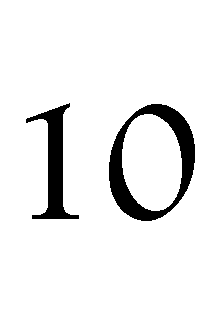
<style>
.page{position:relative;width:222px;height:323px;background:#ffffff}
.page>*{position:absolute;margin:0}
.t1{font:180px "FootlightMTLight";color:#000000}
</style>
<div class="page">
<p class="t1" style="left:26px;top:103px;width:169px;height:118px">10</p>
</div>
